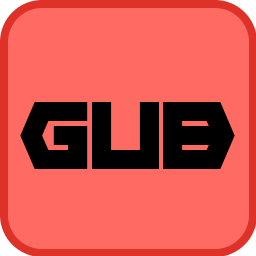
<style>
.page{position:relative;width:256px;height:256px;background:#ff6b63}
.page>*{position:absolute;margin:0}
.t1{font:98px "Diagon";color:#000000}
</style>
<div class="page">
<p class="t1" style="left:20px;top:102px;width:215px;height:67px">GUB</p>
</div>
